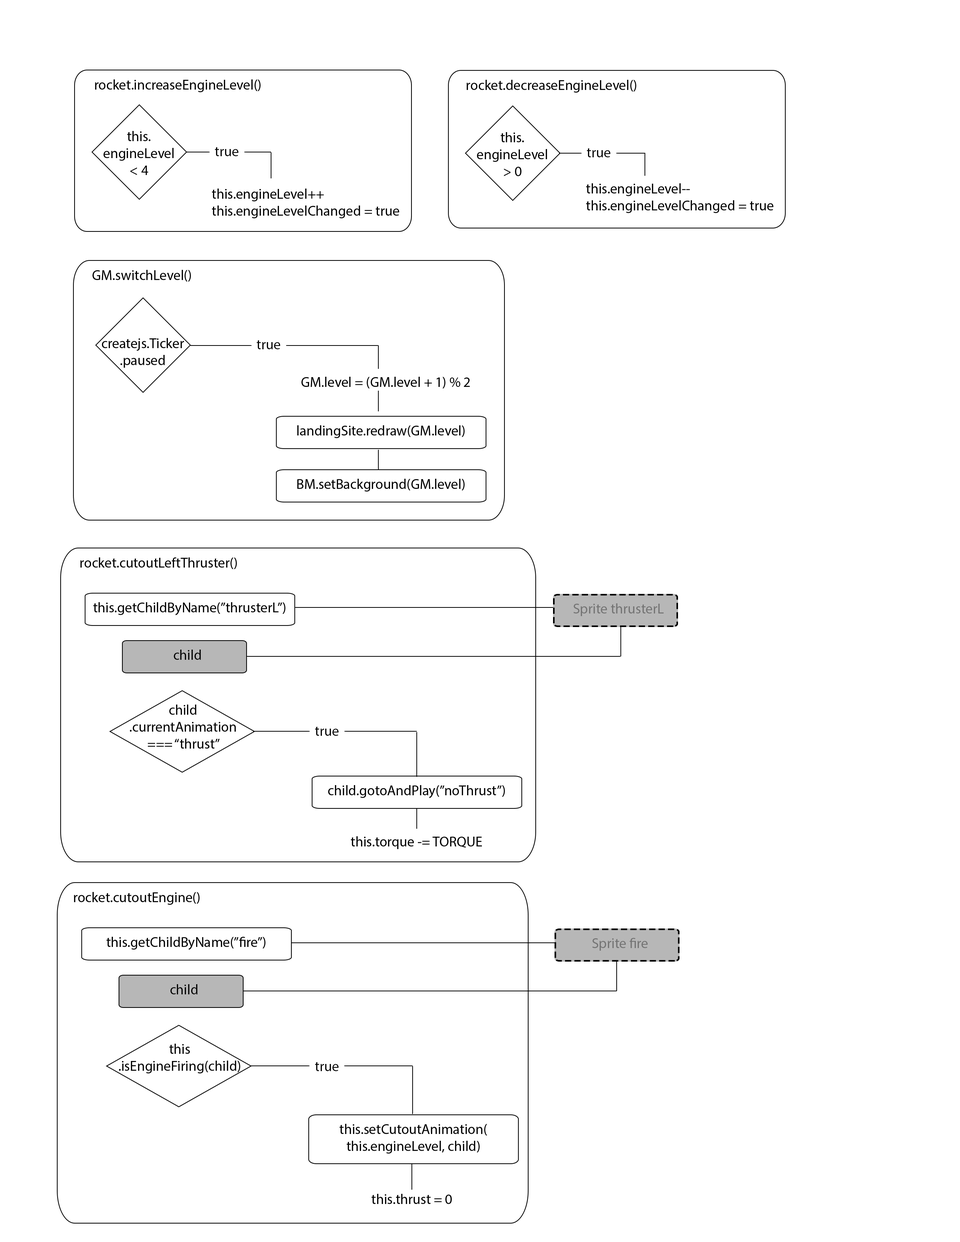
<style>
.page{position:relative;width:960px;height:1242px;background:#ffffff}
.page>*{position:absolute;margin:0}
.t1{font:14.1px "MyriadPro-Regular";color:#000000}
.t2{font:14.1px "MyriadPro-Regular";color:#737373}
</style>
<div class="page">
<p class="t1" style="left:95px;top:79px;width:165px;height:13px">rocket.increaseEngineLevel()</p>
<p class="t1" style="left:466px;top:80px;width:170px;height:13px">rocket.decreaseEngineLevel()</p>
<p class="t1" style="left:104px;top:131px;width:70px;height:44px;text-align:center">this.<br>engineLevel<br>&lt; 4</p>
<p class="t1" style="left:477px;top:132px;width:70px;height:44px;text-align:center">this.<br>engineLevel<br>&gt; 0</p>
<p class="t1" style="left:215px;top:147px;width:24px;height:9px">true</p>
<p class="t1" style="left:587px;top:148px;width:24px;height:9px">true</p>
<p class="t1" style="left:586px;top:183px;width:188px;height:30px">this.engineLevel--<br>this.engineLevelChanged = true</p>
<p class="t1" style="left:212px;top:189px;width:187px;height:29px">this.engineLevel++<br>this.engineLevelChanged = true</p>
<p class="t1" style="left:92px;top:270px;width:99px;height:12px">GM.switchLevel()</p>
<p class="t1" style="left:102px;top:338px;width:82px;height:30px;text-align:center">createjs.Ticker<br>.paused</p>
<p class="t1" style="left:257px;top:340px;width:23px;height:9px">true</p>
<p class="t1" style="left:301px;top:377px;width:169px;height:11px">GM.level = (GM.level + 1) % 2</p>
<p class="t1" style="left:297px;top:425px;width:168px;height:13px">landingSite.redraw(GM.level)</p>
<p class="t1" style="left:297px;top:479px;width:168px;height:13px">BM.setBackground(GM.level)</p>
<p class="t1" style="left:80px;top:558px;width:157px;height:11px">rocket.cutoutLeftThruster()</p>
<p class="t1" style="left:93px;top:602px;width:192px;height:13px">this.getChildByName(”thrusterL”)</p>
<p class="t2" style="left:573px;top:603px;width:91px;height:13px">Sprite thrusterL</p>
<p class="t1" style="left:174px;top:650px;width:27px;height:10px">child</p>
<p class="t1" style="left:130px;top:705px;width:106px;height:44px;text-align:center">child<br>.currentAnimation<br>=== “thrust”</p>
<p class="t1" style="left:315px;top:727px;width:24px;height:9px">true</p>
<p class="t1" style="left:328px;top:785px;width:177px;height:13px">child.gotoAndPlay(”noThrust”)</p>
<p class="t1" style="left:351px;top:836px;width:131px;height:13px">this.torque -= TORQUE</p>
<p class="t1" style="left:74px;top:892px;width:126px;height:13px">rocket.cutoutEngine()</p>
<p class="t1" style="left:107px;top:937px;width:158px;height:13px">this.getChildByName(”fire”)</p>
<p class="t2" style="left:592px;top:938px;width:56px;height:13px">Sprite fire</p>
<p class="t1" style="left:170px;top:984px;width:28px;height:11px">child</p>
<p class="t1" style="left:119px;top:1044px;width:121px;height:30px;text-align:center">this<br>.isEngineFiring(child)</p>
<p class="t1" style="left:315px;top:1062px;width:24px;height:9px">true</p>
<p class="t1" style="left:340px;top:1124px;width:147px;height:30px;text-align:center">this.setCutoutAnimation(<br>this.engineLevel, child)</p>
<p class="t1" style="left:372px;top:1194px;width:80px;height:10px">this.thrust = 0</p>
</div>
